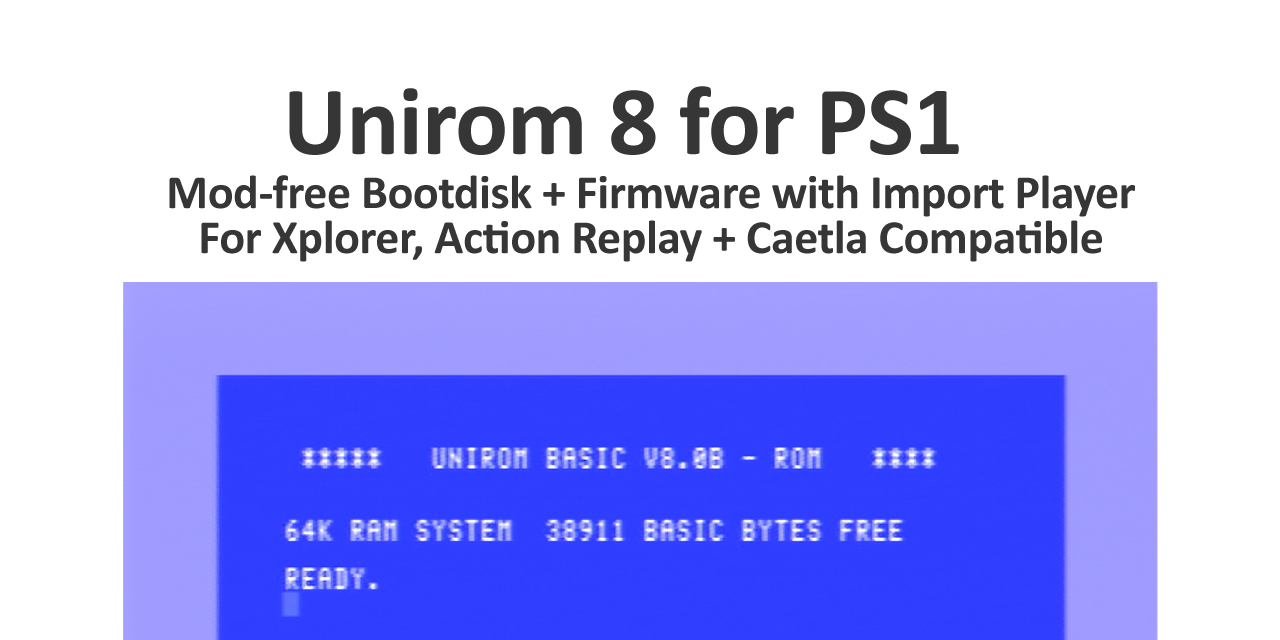
<style>
.page{position:relative;width:1280px;height:640px;background:#ffffff}
.page>*{position:absolute;margin:0}
.t1{font:99.1px "Calibri-Bold";letter-spacing:-0.01em;color:#363636}
.t2{font:48px "Calibri-Bold";letter-spacing:-0.01em;color:#363636}
</style>
<div class="page">
<p class="t1" style="left:289px;top:86px;width:670px;height:69px">Unirom 8 for PS1</p>
<p class="t2" style="left:169px;top:175px;width:966px;height:42px">Mod-free Bootdisk + Firmware with Import Player</p>
<p class="t2" style="left:201px;top:220px;width:901px;height:42px">For Xplorer, Action Replay + Caetla Compatible</p>
</div>
